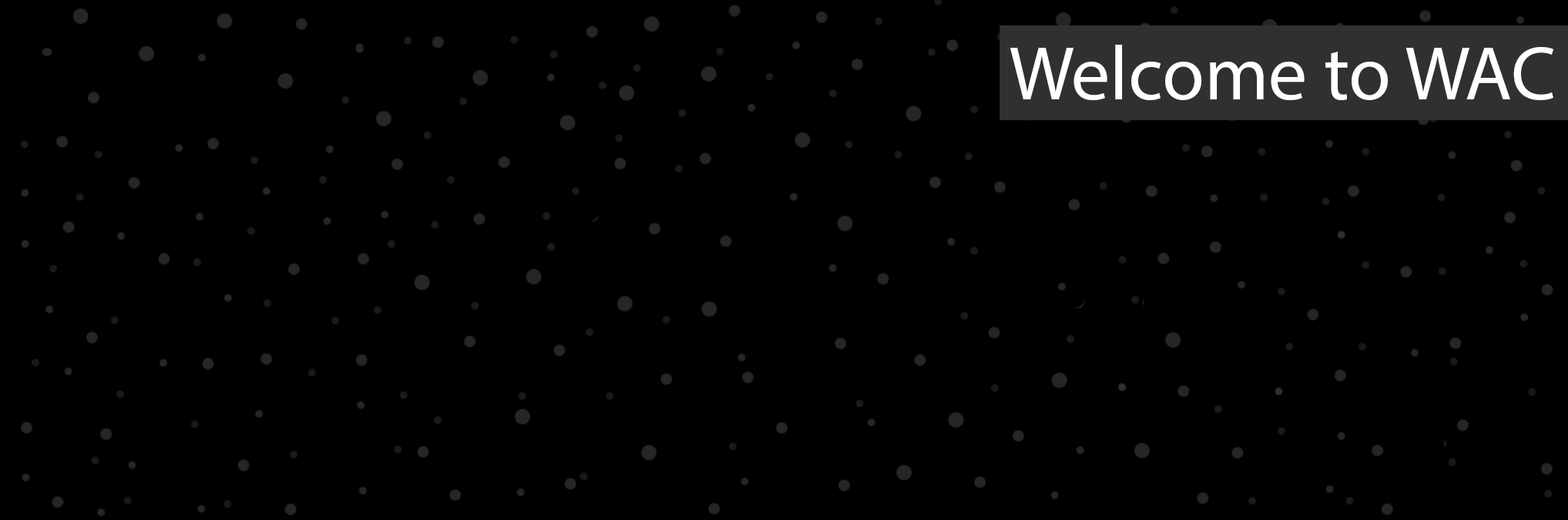
<style>
.page{position:relative;width:1568px;height:520px;background:#000000}
.page>*{position:absolute;margin:0}
.t1{font:77px "MyriadPro-Regular";color:#ffffff}
</style>
<div class="page">
<p class="t1" style="left:1010px;top:45px;width:543px;height:55px">Welcome to WAC</p>
</div>
